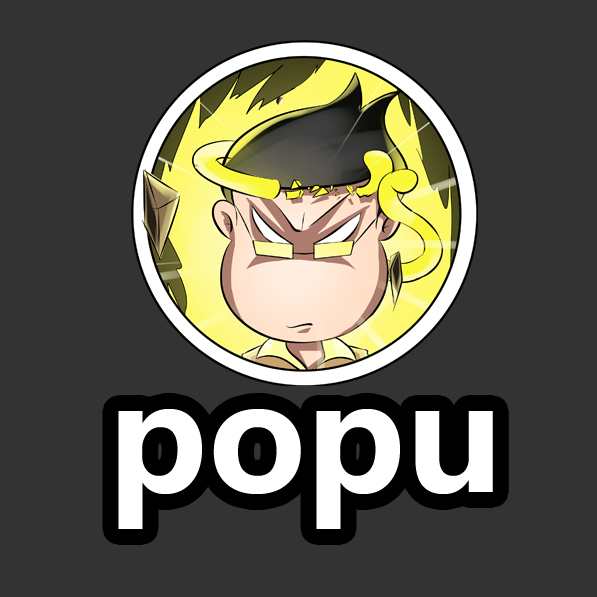
<style>
.page{position:relative;width:597px;height:597px;background:#333333}
.page>*{position:absolute;margin:0}
.t1{font:149.8px "MicrosoftYaHei-Bold";color:#ffffff}
</style>
<div class="page">
<p class="t1" style="left:118px;top:409px;width:375px;height:120px">popu</p>
</div>
